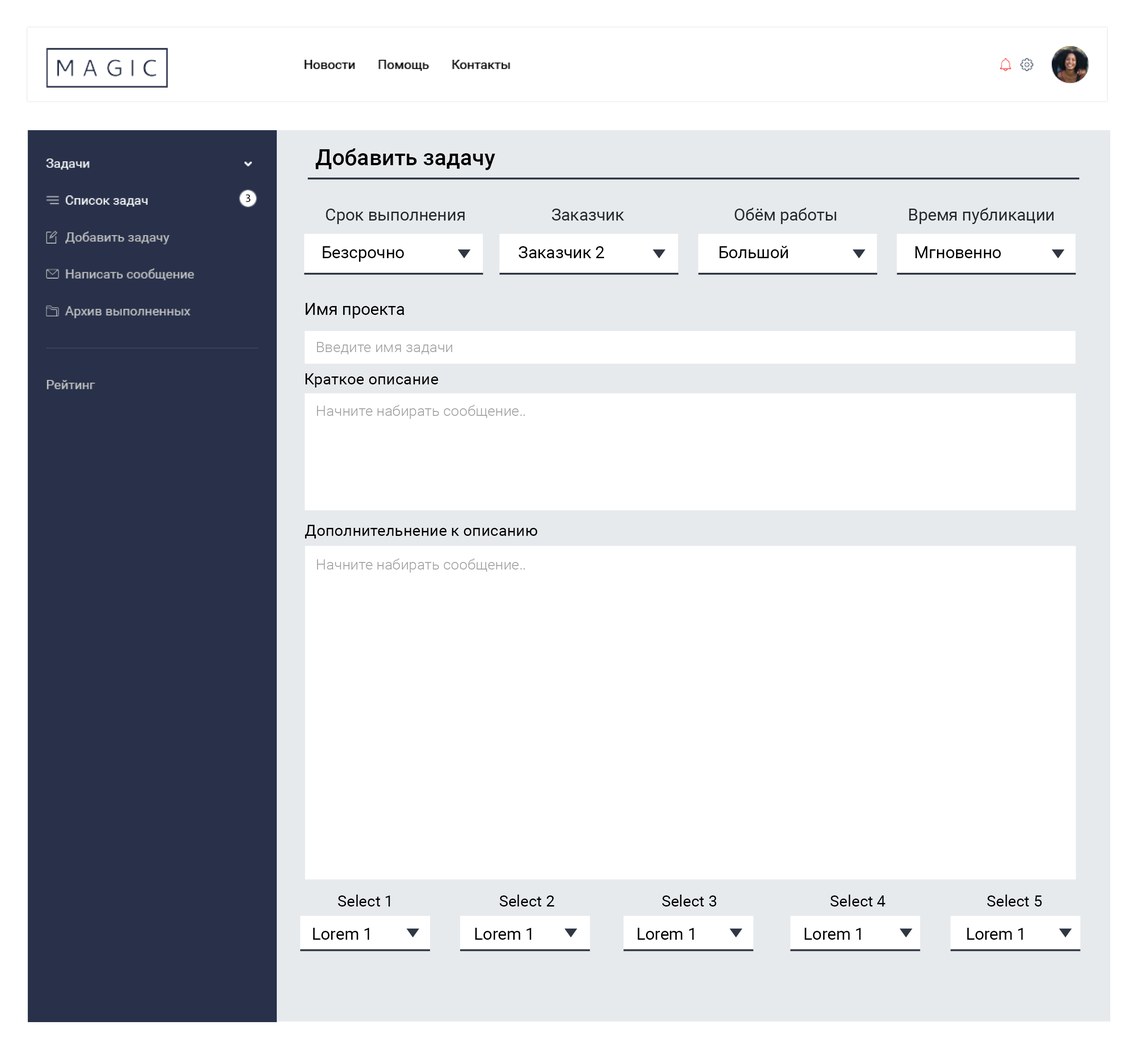
<style>
.page{position:relative;width:1135px;height:1050px;background:#ffffff}
.page>*{position:absolute;margin:0}
.t1{font:22.1px "Roboto-Medium";color:#000000}
.t2{font:11.1px "MyriadPro-Regular";color:#000000}
.t3{font:16.6px "Roboto-Regular";color:#27292d}
.t4{font:16.6px "Roboto-Regular";color:#000000}
.t5{font:14.8px "Roboto-Light";color:#a0a0a0}
.t6{font:15.7px "Roboto-Regular";color:#000000}
</style>
<div class="page">
<p class="t1" style="left:315px;top:148px;width:180px;height:22px">Добавить задачу</p>
<p class="t2" style="left:246px;top:194px;width:5px;height:8px">3</p>
<p class="t3" style="left:326px;top:209px;width:139px;height:15px">Срок выполнения</p>
<p class="t3" style="left:552px;top:209px;width:73px;height:12px">Заказчик</p>
<p class="t3" style="left:735px;top:208px;width:102px;height:16px">Обём работы</p>
<p class="t3" style="left:909px;top:208px;width:145px;height:16px">Время публикации</p>
<p class="t4" style="left:720px;top:246px;width:68px;height:12px">Большой</p>
<p class="t4" style="left:323px;top:246px;width:81px;height:16px">Безсрочно</p>
<p class="t4" style="left:519px;top:246px;width:85px;height:12px">Заказчик 2</p>
<p class="t4" style="left:916px;top:246px;width:85px;height:12px">Мгновенно</p>
<p class="t4" style="left:306px;top:303px;width:98px;height:15px">Имя проекта</p>
<p class="t5" style="left:317px;top:342px;width:135px;height:12px">Введите имя задачи</p>
<p class="t6" style="left:306px;top:373px;width:133px;height:15px">Краткое описание</p>
<p class="t5" style="left:317px;top:405px;width:208px;height:14px">Начните набирать сообщение..</p>
<p class="t6" style="left:305px;top:525px;width:233px;height:14px">Дополнительнение к описанию</p>
<p class="t5" style="left:317px;top:559px;width:208px;height:14px">Начните набирать сообщение..</p>
<p class="t6" style="left:338px;top:895px;width:52px;height:12px">Select 1</p>
<p class="t6" style="left:500px;top:895px;width:55px;height:12px">Select 2</p>
<p class="t6" style="left:662px;top:895px;width:55px;height:12px">Select 3</p>
<p class="t6" style="left:831px;top:895px;width:55px;height:12px">Select 4</p>
<p class="t6" style="left:987px;top:895px;width:55px;height:12px">Select 5</p>
<p class="t4" style="left:313px;top:928px;width:56px;height:12px">Lorem 1</p>
<p class="t4" style="left:475px;top:928px;width:57px;height:12px">Lorem 1</p>
<p class="t4" style="left:638px;top:928px;width:56px;height:12px">Lorem 1</p>
<p class="t4" style="left:805px;top:928px;width:56px;height:12px">Lorem 1</p>
<p class="t4" style="left:967px;top:928px;width:56px;height:12px">Lorem 1</p>
</div>
